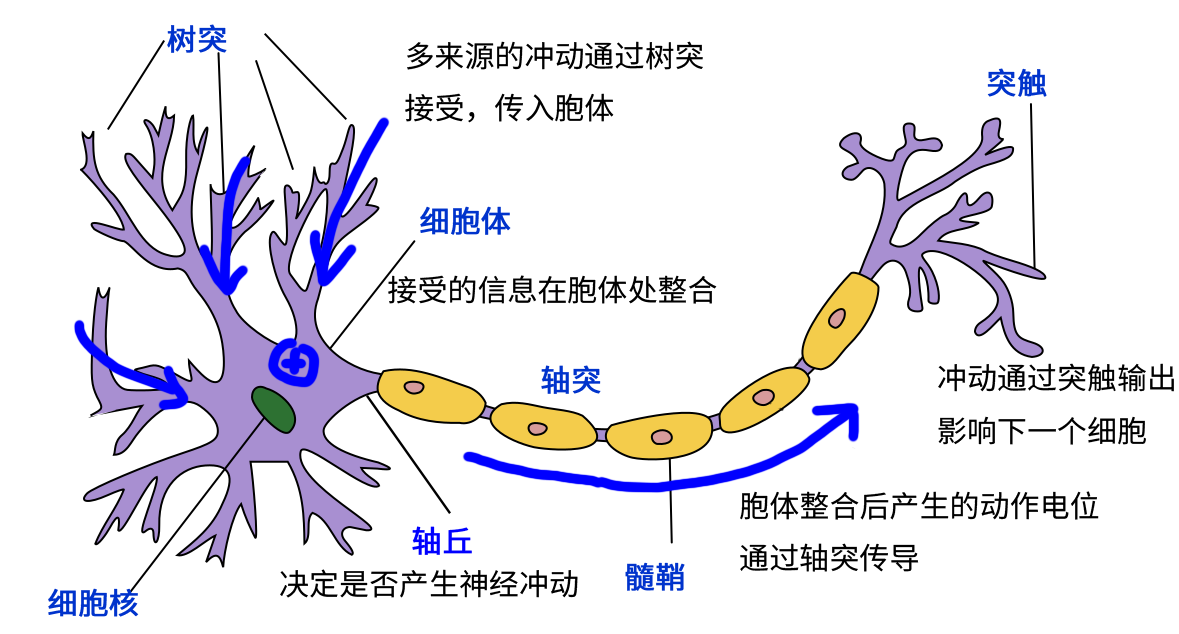
<style>
.page{position:relative;width:1179px;height:634px;background:#ffffff}
.page>*{position:absolute;margin:0}
.t1{font:30px "SourceHanSansSC-Regular";color:#0033cc;font-weight:bold}
.t2{font:30px "SourceHanSansSC-Regular";color:#000000}
.t3{font:30px "SourceHanSansSC-Regular";color:#0000ff;font-weight:bold}
</style>
<div class="page">
<p class="t1" style="left:167px;top:24px;width:60px;height:29px">树突</p>
<p class="t2" style="left:405px;top:41px;width:298px;height:82px">多来源的冲动通过树突<br>接受，传入胞体</p>
<p class="t1" style="left:987px;top:68px;width:60px;height:29px">突触</p>
<p class="t1" style="left:420px;top:206px;width:91px;height:29px">细胞体</p>
<p class="t2" style="left:388px;top:275px;width:329px;height:29px">接受的信息在胞体处整合</p>
<p class="t1" style="left:541px;top:365px;width:60px;height:29px">轴突</p>
<p class="t2" style="left:938px;top:363px;width:236px;height:82px">冲动通过突触输出<br>影响下一个细胞</p>
<p class="t2" style="left:740px;top:491px;width:359px;height:81px">胞体整合后产生的动作电位<br>通过轴突传导</p>
<p class="t3" style="left:412px;top:526px;width:60px;height:29px">轴丘</p>
<p class="t2" style="left:280px;top:569px;width:298px;height:29px">决定是否产生神经冲动</p>
<p class="t1" style="left:625px;top:562px;width:60px;height:29px">髓鞘</p>
<p class="t1" style="left:48px;top:588px;width:91px;height:29px">细胞核</p>
</div>
